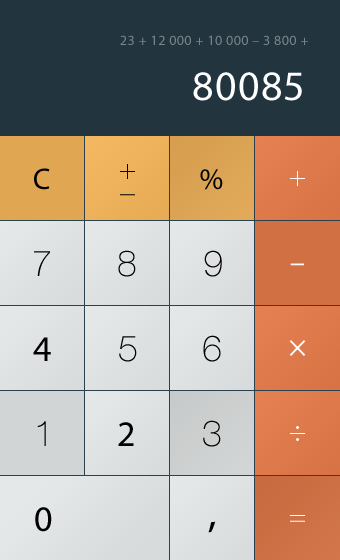
<style>
.page{position:relative;width:340px;height:560px;background:#22343e}
.page>*{position:absolute;margin:0}
.t1{font:14px "MyriadPro-Regular";letter-spacing:0.03em;color:#7a858b}
.t2{font:42px "MyriadPro-Regular";letter-spacing:0.03em;color:#ffffff}
.t3{font:30px "MyriadPro-Regular";letter-spacing:0.03em;color:#000000}
.t4{font:30px/24px "HelveticaNeue-Thin";letter-spacing:0.03em;color:#000000}
.t5{font:30px "HelveticaNeue-Thin";letter-spacing:0.03em;color:#ffffff}
.t6{font:36px "HelveticaNeue-Thin";letter-spacing:0.03em;color:#000000}
.t7{font:30px "MyriadPro-Regular";letter-spacing:0.03em;color:#ffffff}
.t8{font:36px "MyriadPro-Regular";letter-spacing:0.03em;color:#000000}
.t9{font:30px "MyriadPro-Regular";letter-spacing:0.03em;color:#fffefe}
.t10{font:42px "MyriadPro-Regular";letter-spacing:0.03em;color:#000000}
</style>
<div class="page">
<p class="t1" style="left:120px;top:35px;width:188px;height:10px">23 + 12 000 + 10 000 – 3 800 +</p>
<p class="t2" style="left:193px;top:72px;width:109px;height:29px">80085</p>
<p class="t3" style="left:34px;top:168px;width:16px;height:22px">C</p>
<p class="t4" style="left:120px;top:164px;width:15px;height:32px;text-align:center">+<br>–</p>
<p class="t3" style="left:200px;top:169px;width:23px;height:21px">%</p>
<p class="t5" style="left:290px;top:171px;width:15px;height:15px">+</p>
<p class="t6" style="left:34px;top:251px;width:16px;height:25px">7</p>
<p class="t6" style="left:118px;top:250px;width:18px;height:27px">8</p>
<p class="t6" style="left:204px;top:250px;width:18px;height:27px">9</p>
<p class="t7" style="left:290px;top:263px;width:14px;height:3px">–</p>
<p class="t8" style="left:33px;top:337px;width:18px;height:24px">4</p>
<p class="t6" style="left:119px;top:336px;width:18px;height:26px">5</p>
<p class="t6" style="left:203px;top:335px;width:18px;height:27px">6</p>
<p class="t9" style="left:289px;top:340px;width:17px;height:16px">×</p>
<p class="t6" style="left:37px;top:421px;width:9px;height:25px">1</p>
<p class="t8" style="left:118px;top:422px;width:16px;height:24px">2</p>
<p class="t6" style="left:203px;top:420px;width:18px;height:27px">3</p>
<p class="t5" style="left:290px;top:426px;width:15px;height:15px">÷</p>
<p class="t8" style="left:35px;top:507px;width:17px;height:25px">0</p>
<p class="t10" style="left:208px;top:521px;width:8px;height:12px">,</p>
<p class="t5" style="left:290px;top:515px;width:15px;height:7px">=</p>
</div>
